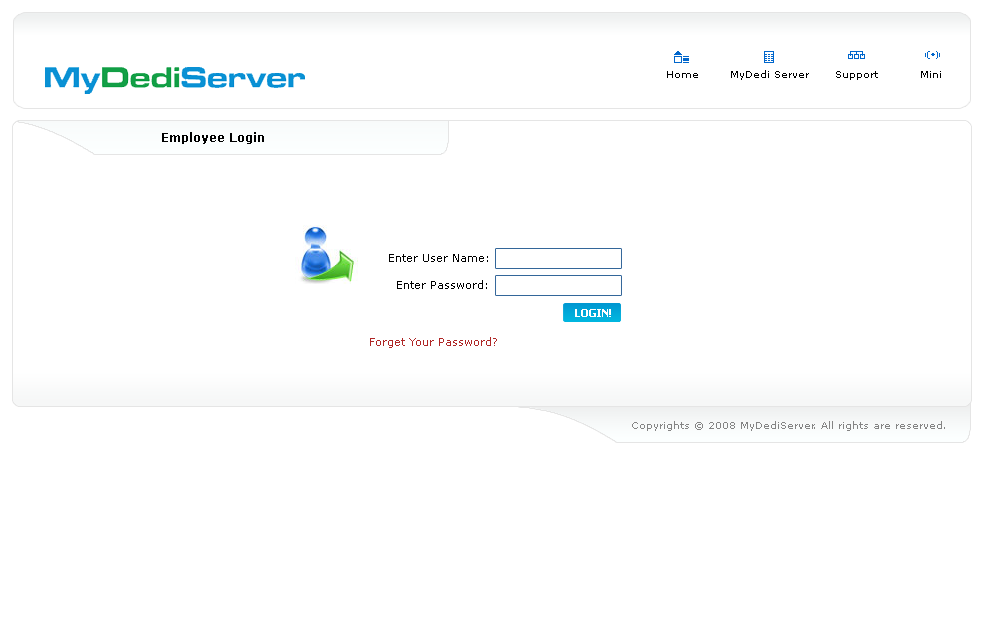
<style>
.page{position:relative;width:984px;height:633px;background:#ffffff}
.page>*{position:absolute;margin:0}
.t1{font:10px "Verdana";color:#000000}
.t2{font:12px "Verdana-Bold";color:#000000}
.t3{font:11px "Verdana";color:#000000}
.t4{font:11px "Tahoma-Bold";color:#ffffff}
.t5{font:11px "Verdana";color:#af2626}
.t6{font:10px "Verdana";color:#848484}
</style>
<div class="page">
<p class="t1" style="left:667px;top:71px;width:31px;height:7px">Home</p>
<p class="t1" style="left:731px;top:70px;width:78px;height:10px">MyDedi Server</p>
<p class="t1" style="left:836px;top:71px;width:42px;height:9px">Support</p>
<p class="t1" style="left:921px;top:71px;width:20px;height:7px">Mini</p>
<p class="t2" style="left:162px;top:132px;width:102px;height:12px">Employee Login</p>
<p class="t3" style="left:389px;top:254px;width:99px;height:8px">Enter User Name:</p>
<p class="t3" style="left:397px;top:280px;width:90px;height:9px">Enter Password:</p>
<p class="t4" style="left:575px;top:309px;width:36px;height:8px">LOGIN!</p>
<p class="t5" style="left:370px;top:337px;width:127px;height:11px">Forget Your Password?</p>
<p class="t6" style="left:632px;top:421px;width:313px;height:10px">Copyrights © 2008 MyDediServer. All rights are reserved.</p>
</div>
